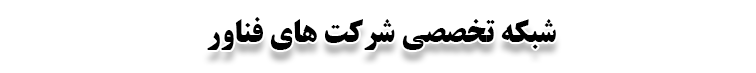
<style>
.page{position:relative;width:756px;height:73px;background:#ffffff}
.page>*{position:absolute;margin:0}
.t1{font:31.9px "BTitrBold";color:#000000}
</style>
<div class="page">
<p class="t1" style="left:207px;top:17px;width:349px;height:33px">شبکه تخصصی شرکت های فناور</p>
</div>
